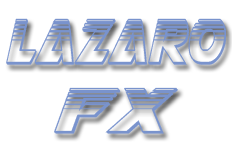
<style>
.page{position:relative;width:232px;height:160px;background:#ffffff}
.page>*{position:absolute;margin:0}
.t1{font:83.4px "AirstrikePlatinum";color:#7993cd;scale:0.61 1}
.t2{font:83.5px "AirstrikePlatinum";color:#7993cd}
</style>
<div class="page">
<p class="t1" style="left:6px;top:18px;width:220px;height:47px">LAZARO</p>
<p class="t2" style="left:54px;top:87px;width:124px;height:47px">fx</p>
</div>
